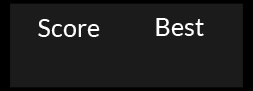
<style>
.page{position:relative;width:253px;height:91px;background:#1b1b1b}
.page>*{position:absolute;margin:0}
.t1{font:25.3px "Lato-Regular";color:#ffffff}
</style>
<div class="page">
<p class="t1" style="left:38px;top:19px;width:62px;height:18px">Score</p>
<p class="t1" style="left:156px;top:18px;width:48px;height:18px">Best</p>
</div>
